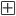
<style>
.page{position:relative;width:16px;height:16px;background:#ffffff}
.page>*{position:absolute;margin:0}
.t1{font:16px "Verdana-Italic";letter-spacing:0.01em;color:#333333}
</style>
<div class="page">
<p class="t1" style="left:2px;top:3px;width:11px;height:10px">+</p>
</div>
